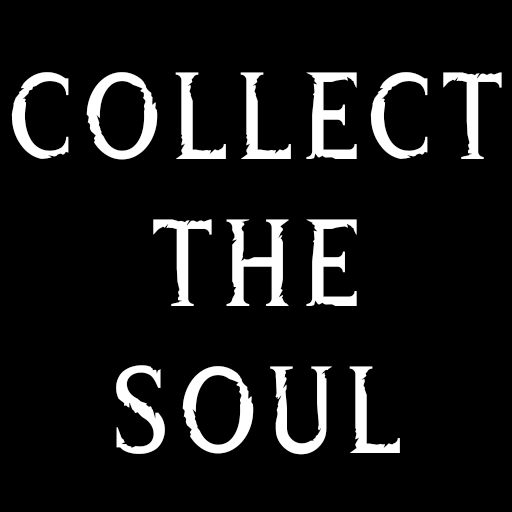
<style>
.page{position:relative;width:512px;height:512px;background:#000000}
.page>*{position:absolute;margin:0}
.t1{font:122.3px "WreckedShipRegular";letter-spacing:0.05em;color:#ffffff}
</style>
<div class="page">
<p class="t1" style="left:11px;top:72px;width:491px;height:383px;text-align:center">collect<br>the<br>soul</p>
</div>
